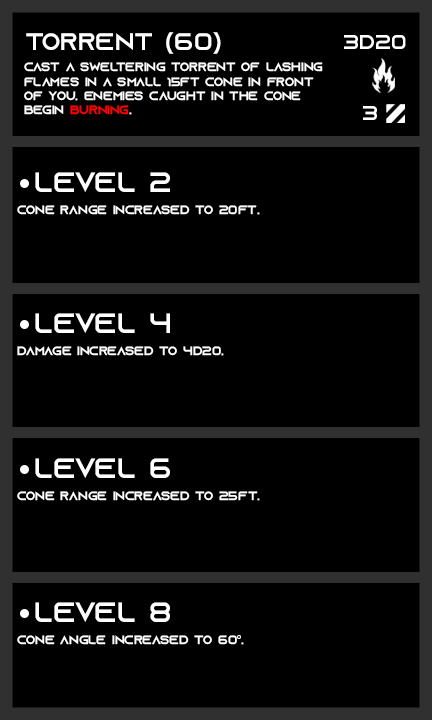
<style>
.page{position:relative;width:432px;height:720px;background:#000000}
.page>*{position:absolute;margin:0}
.t1{font:24px "AzonixRegular";color:#ffffff}
.t2{font:20px "AzonixRegular";color:#ffffff}
.t3{font:12px "AzonixRegular";color:#ffffff}
.t4{font:12px "AzonixRegular";color:#ff0000}
.t5{font:28px "AzonixRegular";color:#ffffff}
.t6{font:12px "MyriadPro-Regular";color:#ffffff}
</style>
<div class="page">
<p class="t1" style="left:26px;top:32px;width:195px;height:22px">torrent (60)</p>
<p class="t2" style="left:344px;top:35px;width:62px;height:14px">3d20</p>
<p class="t3" style="left:24px;top:62px;width:299px;height:53px">cast a sweltering torrent of lashing <br>flames in a small 15ft cone in front<br>of you. enemies caught in the cone<br>begin <span class="t4">burning</span>.</p>
<p class="t2" style="left:363px;top:106px;width:14px;height:14px">3</p>
<p class="t5" style="left:35px;top:172px;width:135px;height:20px">level 2</p>
<p class="t3" style="left:17px;top:205px;width:243px;height:10px">cone range increased to 20ft.</p>
<p class="t5" style="left:35px;top:313px;width:135px;height:20px">level 4</p>
<p class="t3" style="left:17px;top:346px;width:207px;height:10px">damage increased to 4d20.</p>
<p class="t5" style="left:35px;top:458px;width:135px;height:20px">level 6</p>
<p class="t3" style="left:17px;top:491px;width:243px;height:10px">cone range increased to 25ft.</p>
<p class="t5" style="left:35px;top:602px;width:135px;height:20px">level 8</p>
<p class="t3" style="left:17px;top:635px;width:227px;height:10px">cone angle increased to 60<span class="t6">°</span>.</p>
</div>
